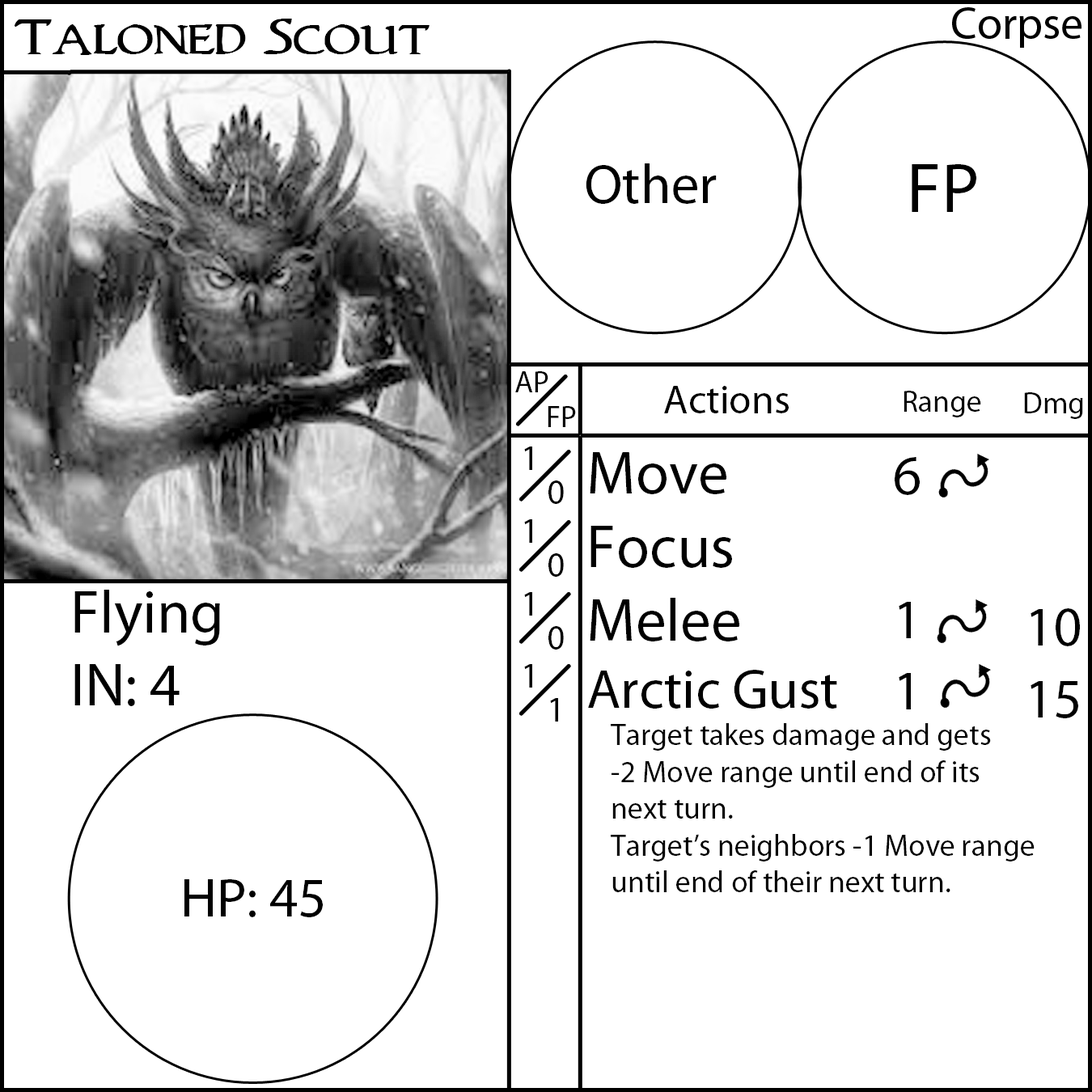
<style>
.page{position:relative;width:1092px;height:1092px;background:#ffffff}
.page>*{position:absolute;margin:0}
.t1{font:55.6px "WoodgodExpanded";color:#000000}
.t2{font:55.6px "MyriadPro-Regular";color:#000000}
.t3{font:70.8px "MyriadPro-Regular";color:#000000}
.t4{font:30.3px "MyriadPro-Regular";color:#000000}
.t5{font:40.4px "MyriadPro-Regular";color:#000000}
.t6{font:35.4px "MyriadPro-Regular";color:#000000}
.t7{font:60.7px "MyriadPro-Regular";color:#000000}
</style>
<div class="page">
<p class="t1" style="left:14px;top:19px;width:416px;height:36px">Taloned Scout</p>
<p class="t2" style="left:586px;top:163px;width:131px;height:41px">Other</p>
<p class="t3" style="left:912px;top:164px;width:64px;height:48px">FP</p>
<p class="t4" style="left:515px;top:371px;width:33px;height:21px">AP</p>
<p class="t5" style="left:664px;top:386px;width:125px;height:27px">Actions</p>
<p class="t4" style="left:904px;top:391px;width:77px;height:26px">Range</p>
<p class="t4" style="left:1024px;top:392px;width:59px;height:27px">Dmg</p>
<p class="t4" style="left:548px;top:406px;width:28px;height:21px">FP</p>
<p class="t6" style="left:524px;top:447px;width:8px;height:241px">1<br>1<br>1<br>1</p>
<p class="t4" style="left:588px;top:452px;width:447px;height:440px"><span class="t7">Move<br>Focus<br>Melee<br></span><span class="t2">Arctic Gust</span><br> Target takes damage and gets <br> -2 Move range until end of its       next turn.<br> Target’s neighbors -1 Move range     until end of their next turn.</p>
<p class="t2" style="left:895px;top:457px;width:25px;height:252px;text-align:center">6<br><br>1<br>1</p>
<p class="t6" style="left:548px;top:480px;width:16px;height:242px">0<br>0<br>0<br>1</p>
<p class="t7" style="left:74px;top:590px;width:146px;height:116px">Flying<br>IN: 4</p>
<p class="t2" style="left:1031px;top:608px;width:49px;height:110px;text-align:center">10<br>15</p>
<p class="t2" style="left:184px;top:879px;width:139px;height:38px">HP: 45</p>
</div>
